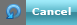
<style>
.page{position:relative;width:77px;height:25px;background:#717373}
.page>*{position:absolute;margin:0}
.t1{font:10.1px "Tahoma-Bold";letter-spacing:0.04em;color:#ffffff;scale:1.1 1}
</style>
<div class="page">
<p class="t1" style="left:32px;top:7px;width:39px;height:8px">Cancel</p>
</div>
